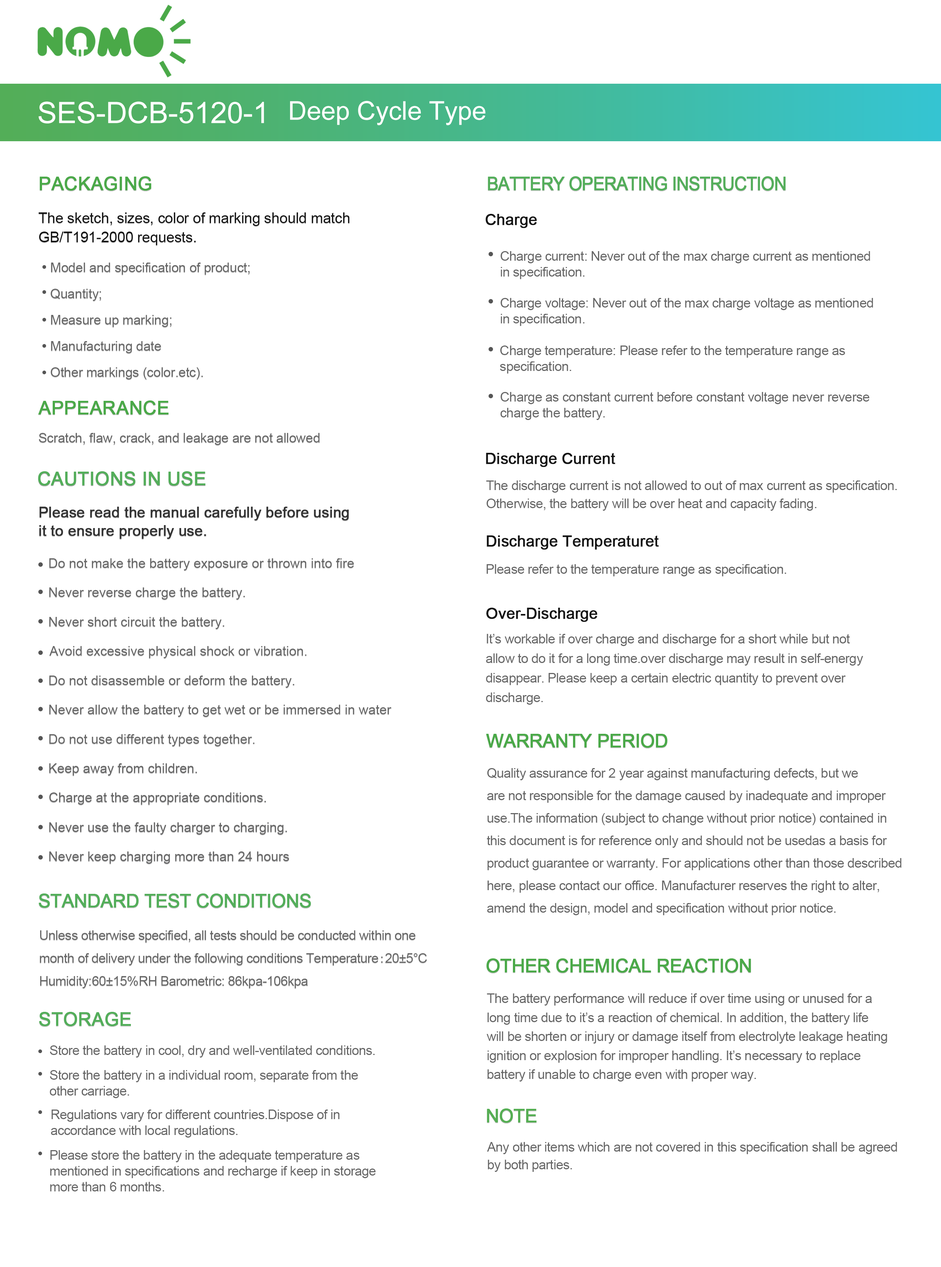
<style>
.page{position:relative;width:941px;height:1267px;background:#ffffff}
.page>*{position:absolute;margin:0}
.t1{font:29.5px "ArialMT";color:#ffffff}
.t2{font:25.8px "ArialMT";color:#ffffff}
.t3{font:18.4px "ArialMT";color:#4aa948;font-weight:bold}
.t4{font:18.4px "ArialMT";letter-spacing:-0.05em;color:#53ae5a;font-weight:bold;scale:0.94 1}
.t5{font:14.8px/7.4px "ArialMT";letter-spacing:-0.01em;color:#121212}
.t6{font:15.5px "ArialMT";letter-spacing:-0.01em;color:#121212;font-weight:bold}
.t7{font:13.3px "ArialMT";letter-spacing:-0.025em;color:#666666}
.t8{font:13.3px "ArialMT";letter-spacing:-0.01em;color:#666666}
.t9{font:13.3px "ArialMT";letter-spacing:-0.02em;color:#666666}
.t10{font:18.4px "ArialMT";color:#53ae5a;font-weight:bold}
.t11{font:14.8px "ArialMT";letter-spacing:-0.01em;color:#333333;font-weight:bold}
.t12{font:13.3px "ArialMT";color:#666666}
.t13{font:18.4px "ArialMT";letter-spacing:-0.025em;color:#4aa948;font-weight:bold}
.t14{font:18.4px "ArialMT";letter-spacing:-0.03em;color:#53ae5a;font-weight:bold}
.t15{font:13.3px/7.4px "ArialMT";letter-spacing:-0.025em;color:#666666}
.t16{font:13.3px/7.4px "SimSun";letter-spacing:-0.025em;color:#666666}
.t17{font:18.4px "ArialMT";letter-spacing:-0.025em;color:#55ae53;font-weight:bold}
</style>
<div class="page">
<p class="t1" style="left:38px;top:101px;width:226px;height:23px">SES-DCB-5120-1</p>
<p class="t2" style="left:290px;top:101px;width:196px;height:24px">Deep Cycle Type</p>
<p class="t3" style="left:39px;top:176px;width:113px;height:15px">PACKAGING</p>
<p class="t4" style="left:488px;top:176px;width:298px;height:15px">BATTERY OPERATING INSTRUCTION</p>
<p class="t5" style="left:38px;top:212px;width:312px;height:33px">The sketch, sizes, color of marking should match<br>GB/T191-2000 requests.</p>
<p class="t6" style="left:486px;top:214px;width:51px;height:14px">Charge</p>
<p class="t7" style="left:500px;top:251px;width:370px;height:28px">Charge current: Never out of the max charge current as mentioned<br>in specification.</p>
<p class="t8" style="left:51px;top:263px;width:199px;height:116px">Model and specification of product; <br>Quantity;<br>Measure up marking;<br>Manufacturing date  <br>Other markings (color.etc).</p>
<p class="t7" style="left:500px;top:298px;width:373px;height:28px">Charge voltage: Never out of the max charge voltage as mentioned<br>in specification.</p>
<p class="t7" style="left:500px;top:346px;width:345px;height:28px">Charge temperature: Please refer to the temperature range as <br>specification.</p>
<p class="t3" style="left:38px;top:400px;width:131px;height:15px">APPEARANCE</p>
<p class="t9" style="left:500px;top:392px;width:370px;height:28px">Charge as constant current before constant voltage never reverse <br>charge the battery.</p>
<p class="t8" style="left:39px;top:433px;width:281px;height:12px">Scratch, flaw, crack, and leakage are not allowed</p>
<p class="t6" style="left:486px;top:453px;width:129px;height:14px">Discharge Current</p>
<p class="t10" style="left:38px;top:471px;width:167px;height:15px">CAUTIONS IN USE</p>
<p class="t7" style="left:486px;top:481px;width:411px;height:30px">The discharge current is not allowed to out of max current as specification.<br>Otherwise, the battery will be over heat and capacity fading.</p>
<p class="t11" style="left:39px;top:507px;width:310px;height:32px">Please read the manual carefully before using<br>it to ensure properly use.</p>
<p class="t6" style="left:487px;top:535px;width:172px;height:15px">Discharge Temperaturet</p>
<p class="t12" style="left:49px;top:558px;width:305px;height:12px">Do not make the battery exposure or thrown into fire</p>
<p class="t7" style="left:486px;top:564px;width:300px;height:12px">Please refer to the temperature range as specification.</p>
<p class="t12" style="left:49px;top:587px;width:196px;height:13px">Never reverse charge the battery.</p>
<p class="t12" style="left:49px;top:617px;width:175px;height:12px">Never short circuit the battery.</p>
<p class="t6" style="left:486px;top:608px;width:111px;height:14px">Over-Discharge</p>
<p class="t7" style="left:486px;top:634px;width:377px;height:71px">It’s workable if over charge and discharge for a short while but not<br>allow to do it for a long time.over discharge may result in self-energy <br>disappear. Please keep a certain electric quantity to prevent over <br>discharge.</p>
<p class="t12" style="left:49px;top:646px;width:257px;height:12px">Avoid excessive physical shock or vibration.</p>
<p class="t12" style="left:49px;top:676px;width:245px;height:12px">Do not disassemble or deform the battery.</p>
<p class="t12" style="left:49px;top:705px;width:343px;height:12px">Never allow the battery to get wet or be immersed in water</p>
<p class="t12" style="left:49px;top:734px;width:205px;height:12px">Do not use different types together.</p>
<p class="t13" style="left:486px;top:733px;width:181px;height:15px">WARRANTY PERIOD</p>
<p class="t12" style="left:49px;top:763px;width:148px;height:13px">Keep away from children.</p>
<p class="t7" style="left:487px;top:768px;width:415px;height:147px">Quality assurance for 2 year against manufacturing defects, but we<br>are not responsible for the damage caused by inadequate and improper<br>use.The information (subject to change without prior notice) contained in <br>this document is for reference only and should not be usedas a basis for <br>product guarantee or warranty. For applications other than those described <br>here, please contact our office. Manufacturer reserves the right to alter, <br>amend the design, model and specification without prior notice.</p>
<p class="t12" style="left:49px;top:792px;width:217px;height:13px">Charge at the appropriate conditions.</p>
<p class="t12" style="left:49px;top:822px;width:238px;height:13px">Never use the faulty charger to charging.</p>
<p class="t12" style="left:49px;top:851px;width:240px;height:13px">Never keep charging more than 24 hours</p>
<p class="t14" style="left:39px;top:894px;width:272px;height:14px">STANDARD TEST CONDITIONS</p>
<p class="t15" style="left:40px;top:930px;width:387px;height:58px">Unless otherwise specified, all tests should be conducted within one<br>month of delivery under the following conditions Temperature<span class="t16">:</span>20±5°C<br>Humidity: 60±15%RH Barometric: 86kpa-106kpa</p>
<p class="t13" style="left:486px;top:958px;width:265px;height:15px">OTHER CHEMICAL REACTION</p>
<p class="t7" style="left:487px;top:993px;width:400px;height:89px">The battery performance will reduce if over time using or unused for a<br>long time due to it’s a reaction of chemical. In addition, the battery life<br>will be shorten or injury or damage itself from electrolyte leakage heating <br>ignition or explosion for improper handling. It’s necessary to replace<br>battery if unable to charge even with proper way.</p>
<p class="t10" style="left:39px;top:1012px;width:92px;height:14px">STORAGE</p>
<p class="t7" style="left:50px;top:1045px;width:325px;height:13px">Store the battery in cool, dry and well-ventilated conditions.</p>
<p class="t7" style="left:50px;top:1070px;width:308px;height:28px">Store the battery in a individual room, separate from the<br>other carriage.</p>
<p class="t7" style="left:51px;top:1110px;width:289px;height:28px">Regulations vary for different countries.Dispose of in <br>accordance with local regulations.</p>
<p class="t17" style="left:487px;top:1109px;width:50px;height:14px">NOTE</p>
<p class="t7" style="left:487px;top:1142px;width:410px;height:30px">Any other items which are not covered in this specification shall be agreed<br>by both parties.</p>
<p class="t7" style="left:50px;top:1150px;width:326px;height:41px">Please store the battery in the adequate temperature as<br>mentioned in specifications and recharge if keep in storage<br>more than 6 months.</p>
</div>
